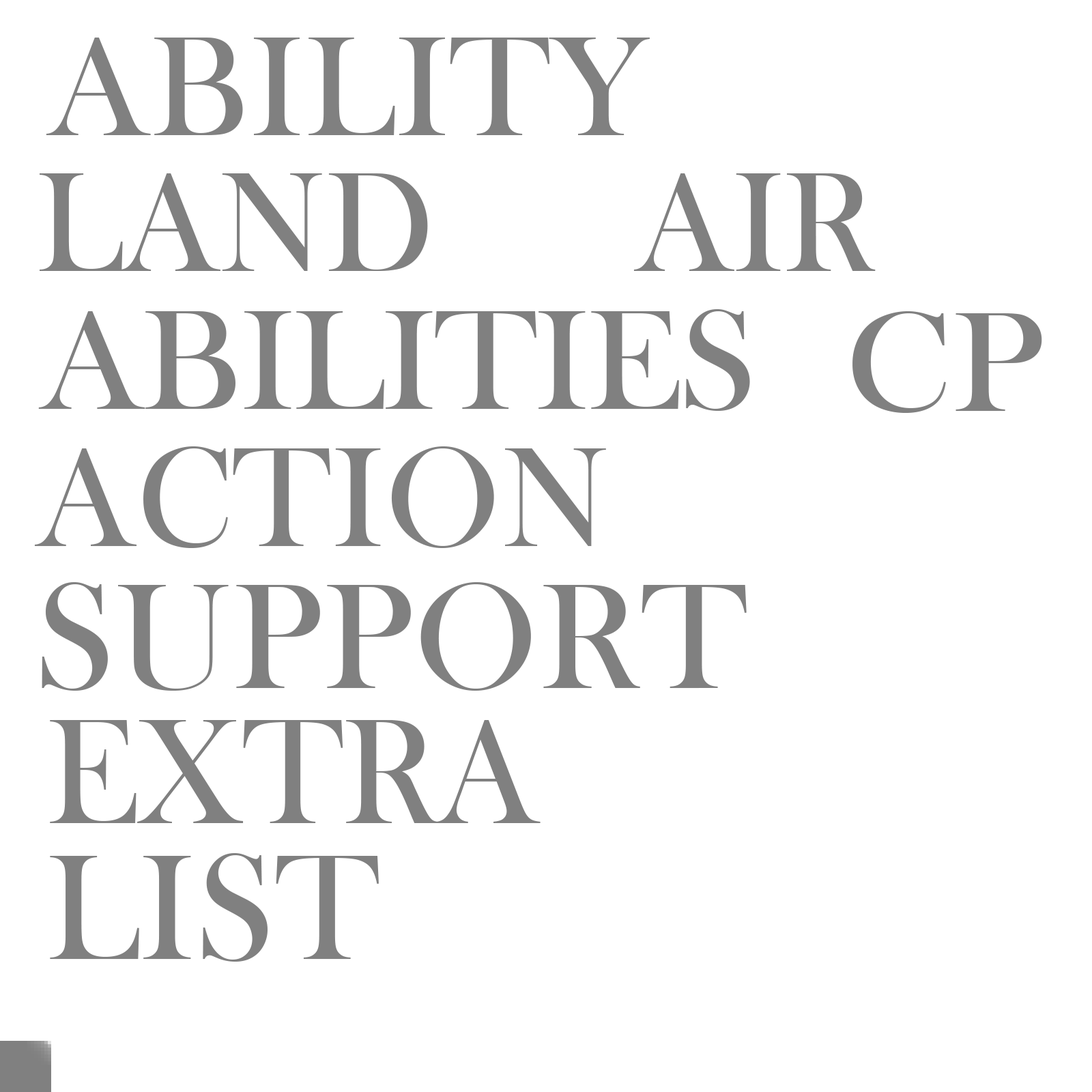
<style>
.page{position:relative;width:1092px;height:1092px;background:#ffffff}
.page>*{position:absolute;margin:0}
.t1{font:146.3px "BaskOldFace";letter-spacing:0.01em;color:#808080}
.t2{font:146.3px "BaskOldFace";color:#808080;scale:0.96 1}
.t3{font:146.3px "BaskOldFace";letter-spacing:-0.01em;color:#808080}
.t4{font:146.3px "BaskOldFace";letter-spacing:0.01em;color:#808080;scale:1.08 1}
.t5{font:154.7px "BaskOldFace";letter-spacing:0.01em;color:#808080}
.t6{font:154.7px "BaskOldFace";color:#808080;scale:0.94 1}
</style>
<div class="page">
<p class="t1" style="left:46px;top:38px;width:604px;height:97px">ABILITY</p>
<p class="t2" style="left:40px;top:173px;width:388px;height:98px">LAND</p>
<p class="t2" style="left:633px;top:173px;width:243px;height:98px">AIR</p>
<p class="t3" style="left:38px;top:309px;width:712px;height:102px">ABILITIES</p>
<p class="t4" style="left:852px;top:311px;width:190px;height:102px">CP</p>
<p class="t1" style="left:34px;top:446px;width:572px;height:102px">ACTION</p>
<p class="t5" style="left:42px;top:582px;width:705px;height:109px">SUPPORT</p>
<p class="t6" style="left:50px;top:720px;width:491px;height:103px">EXTRA</p>
<p class="t5" style="left:50px;top:853px;width:329px;height:109px">LIST</p>
</div>
